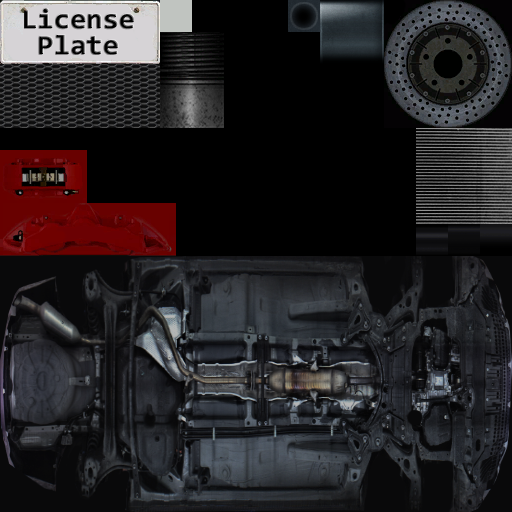
<style>
.page{position:relative;width:512px;height:512px;background:#000000}
.page>*{position:absolute;margin:0}
.t1{font:27.4px "Consolas-Bold";color:#000000;scale:1.08 1}
</style>
<div class="page">
<p class="t1" style="left:24px;top:8px;width:110px;height:21px">License</p>
<p class="t1" style="left:39px;top:35px;width:79px;height:20px">Plate</p>
</div>
